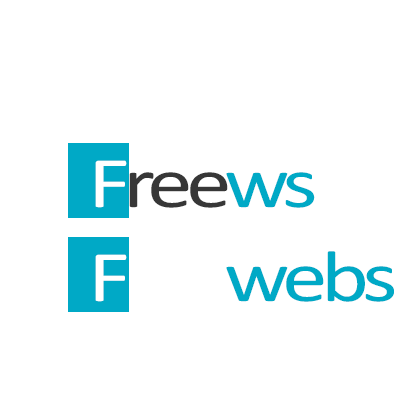
<style>
.page{position:relative;width:400px;height:400px;background:#ffffff}
.page>*{position:absolute;margin:0}
.t1{font:73.3px "Calibri";letter-spacing:-0.075em;color:#373737;scale:1.25 1}
.t2{font:73.3px "Calibri";letter-spacing:-0.075em;color:#ffffff;scale:1.25 1}
.t3{font:73.3px "Calibri";letter-spacing:-0.075em;color:#00a9c6;scale:1.25 1}
</style>
<div class="page">
<p class="t1" style="left:95px;top:160px;width:220px;height:48px"><span class="t2">F</span>ree<span class="t3">ws</span></p>
<p class="t2" style="left:95px;top:251px;width:299px;height:51px">Free<span class="t3">webs</span></p>
</div>
